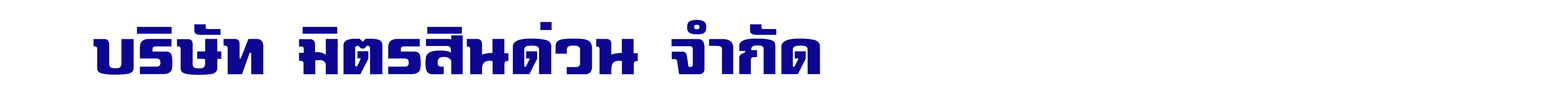
<style>
.page{position:relative;width:1568px;height:100px;background:#ffffff}
.page>*{position:absolute;margin:0}
.t1{font:89.6px "TP-Kubua";color:#0d0690}
</style>
<div class="page">
<p class="t1" style="left:93px;top:20px;width:727px;height:55px">บริษัท มิตรสินด่วน จำกัด</p>
</div>
